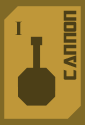
<style>
.page{position:relative;width:85px;height:125px;background:#bf9739}
.page>*{position:absolute;margin:0}
.t1{font:20px "TransformersMovie";letter-spacing:0.04em;color:#4c3f17}
.t2{font:20px "TimesNewRomanPS-BoldMT";letter-spacing:-0.04em;color:#4c3f17}
</style>
<div class="page">
<p class="t1" style="left:63px;top:10px;width:14px;height:70px;rotate:-90deg">Cannon</p>
<p class="t2" style="left:15px;top:21px;width:7px;height:14px">I</p>
</div>
